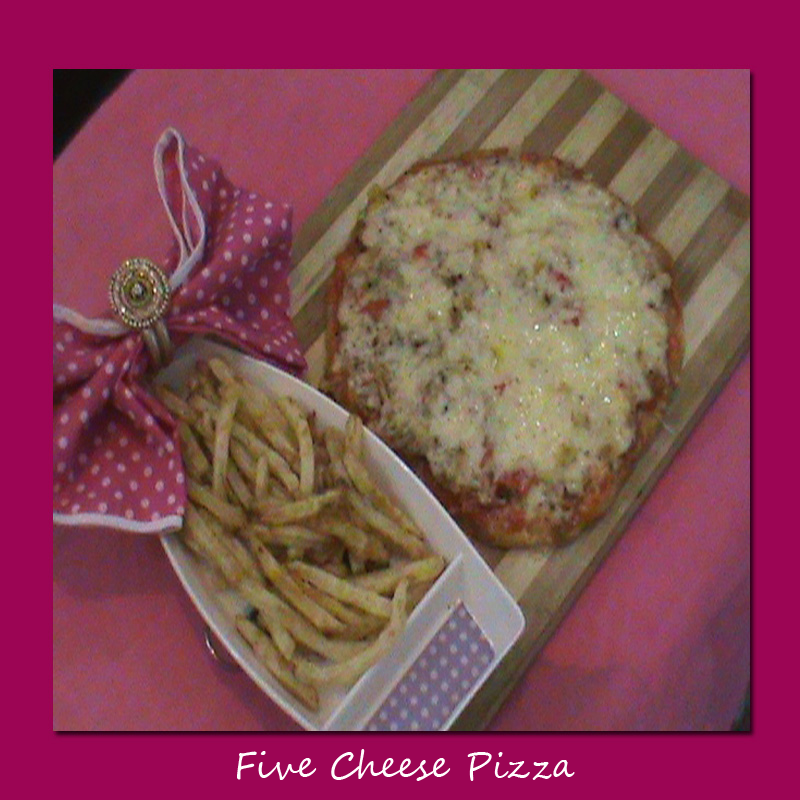
<style>
.page{position:relative;width:800px;height:800px;background:#9c0554}
.page>*{position:absolute;margin:0}
.t1{font:36px "SegoeScript";color:#fffdfd}
</style>
<div class="page">
<p class="t1" style="left:237px;top:749px;width:338px;height:32px">Five Cheese Pizza</p>
</div>
